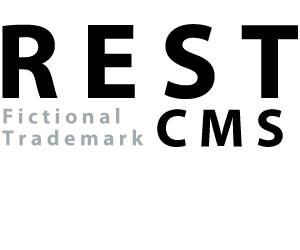
<style>
.page{position:relative;width:300px;height:250px;background:#ffffff}
.page>*{position:absolute;margin:0}
.t1{font:108px "MyriadPro-Bold";letter-spacing:0.2em;color:#000000}
.t2{font:21.8px/10.8px "MyriadPro-Bold";letter-spacing:0.2em;color:#a1abb2}
.t3{font:54.4px "MyriadPro-Bold";letter-spacing:0.2em;color:#000000}
</style>
<div class="page">
<p class="t1" style="left:2px;top:24px;width:296px;height:75px">REST</p>
<p class="t2" style="left:2px;top:108px;width:142px;height:38px">Fictional<br><br>Trademark</p>
<p class="t3" style="left:157px;top:109px;width:126px;height:38px">CMS</p>
</div>
